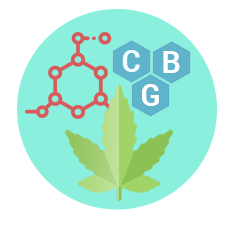
<style>
.page{position:relative;width:230px;height:230px;background:#ffffff}
.page>*{position:absolute;margin:0}
.t1{font:30px "Roboto-Bold";color:#f1fcff;text-transform:uppercase}
.t2{font:30px "Roboto-Bold";color:#ffffff;text-transform:uppercase}
</style>
<div class="page">
<p class="t1" style="left:122px;top:50px;width:18px;height:22px">c</p>
<p class="t2" style="left:163px;top:51px;width:17px;height:22px">b</p>
<p class="t2" style="left:142px;top:84px;width:17px;height:22px">G</p>
</div>
